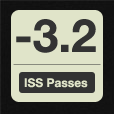
<style>
.page{position:relative;width:114px;height:114px;background:#e0e4c9}
.page>*{position:absolute;margin:0}
.t1{font:46px "HelveticaNeue-Bold";color:#333333}
.t2{font:12px "HelveticaNeue-Bold";color:#e0e4c9}
</style>
<div class="page">
<p class="t1" style="left:16px;top:19px;width:80px;height:34px">-3.2</p>
<p class="t2" style="left:24px;top:78px;width:64px;height:10px">ISS Passes</p>
</div>
